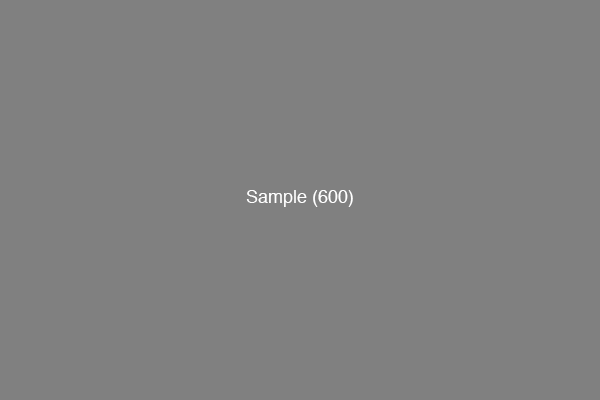
<style>
.page{position:relative;width:600px;height:400px;background:#808080}
.page>*{position:absolute;margin:0}
.t1{font:18px "Helvetica";color:#ffffff}
</style>
<div class="page">
<p class="t1" style="left:246px;top:190px;width:107px;height:17px">Sample (600)</p>
</div>
